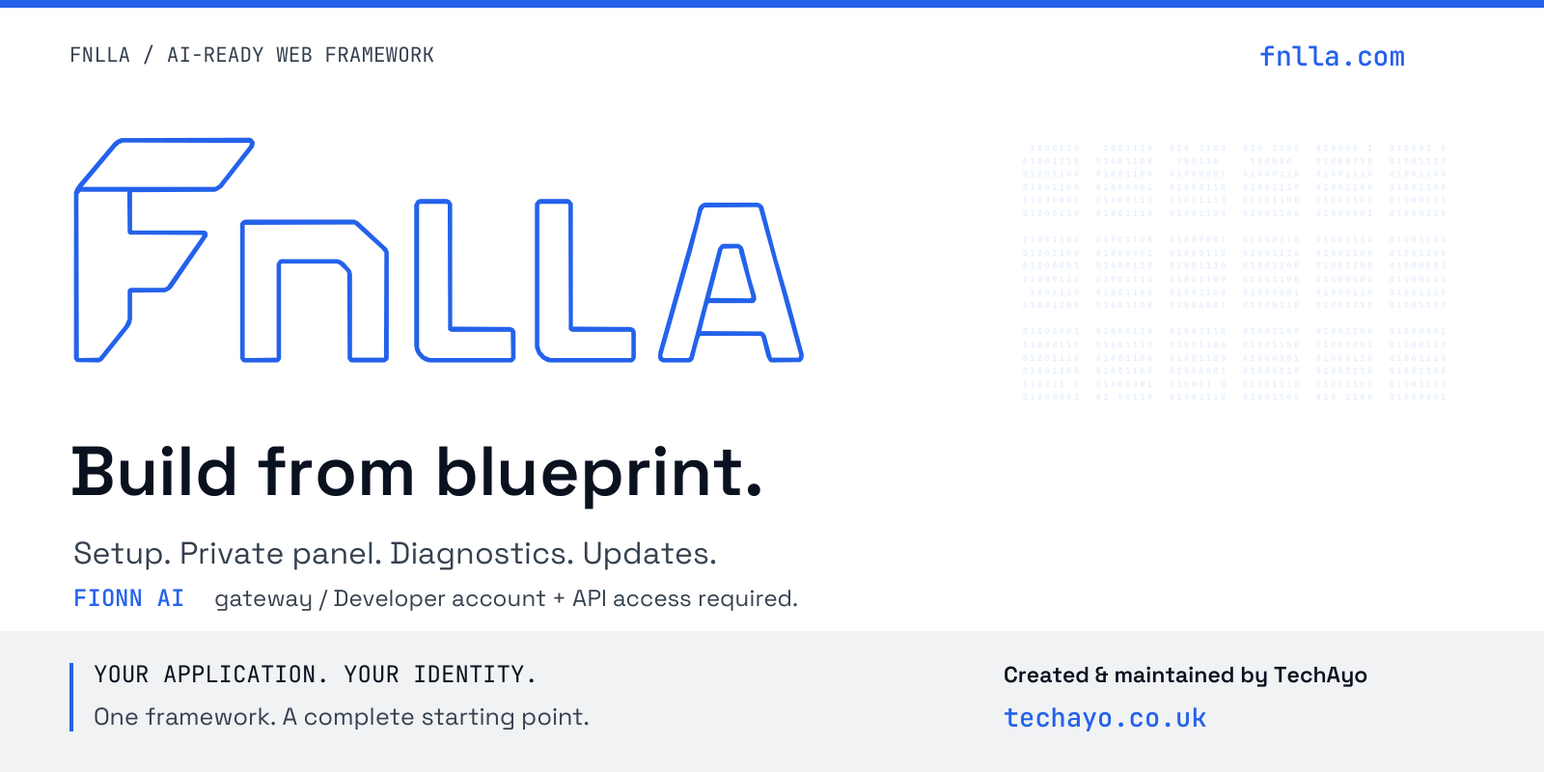
<style>
.page{position:relative;width:1544px;height:772px;background:#ffffff}
.page>*{position:absolute;margin:0}
.t1{font:20.3px "JetBrainsMono-Regular";color:#374151}
.t2{font:27px "JetBrainsMono-SemiBold";color:#2563eb}
.t3{font:69.5px "SpaceGrotesk-SemiBold";color:#0b1220}
.t4{font:30.9px "SpaceGrotesk-Regular";color:#374151}
.t5{font:23.2px "JetBrainsMono-SemiBold";color:#2563eb}
.t6{font:23.2px "SpaceGrotesk-Regular";color:#374151}
.t7{font:23.2px "JetBrainsMono-Regular";color:#0b1220}
.t8{font:22.2px "SpaceGrotesk-SemiBold";color:#0b1220}
.t9{font:24.1px "SpaceGrotesk-Regular";color:#374151}
.t10{font:26.1px "JetBrainsMono-SemiBold";color:#2563eb}
</style>
<div class="page">
<p class="t1" style="left:68px;top:39px;width:369px;height:31px">FNLLA / AI-READY WEB FRAMEWORK</p>
<p class="t2" style="left:1258px;top:36px;width:150px;height:40px">fnlla.com</p>
<p class="t3" style="left:68px;top:425px;width:698px;height:93px">Build from blueprint.</p>
<p class="t4" style="left:71px;top:531px;width:648px;height:44px">Setup. Private panel. Diagnostics. Updates.</p>
<p class="t5" style="left:71px;top:580px;width:116px;height:36px">FIONN AI</p>
<p class="t6" style="left:212px;top:581px;width:589px;height:35px">gateway / Developer account + API access required.</p>
<p class="t7" style="left:92px;top:656px;width:449px;height:36px">YOUR APPLICATION. YOUR IDENTITY.</p>
<p class="t8" style="left:1002px;top:658px;width:369px;height:33px">Created &amp; maintained by TechAyo</p>
<p class="t9" style="left:92px;top:699px;width:501px;height:36px">One framework. A complete starting point.</p>
<p class="t10" style="left:1002px;top:698px;width:207px;height:39px">techayo.co.uk</p>
</div>
